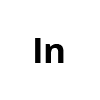
<style>
.page{position:relative;width:100px;height:100px;background:#ffffff}
.page>*{position:absolute;margin:0}
.t1{font:35px "OpenSans-Bold";color:#000000}
</style>
<div class="page">
<p class="t1" style="left:35px;top:38px;width:29px;height:25px">In</p>
</div>
